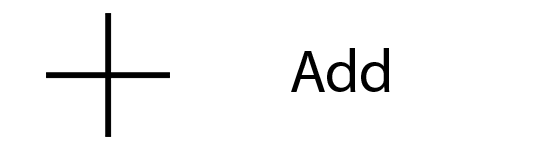
<style>
.page{position:relative;width:540px;height:150px;background:#ffffff}
.page>*{position:absolute;margin:0}
.t1{font:60.4px "MyriadPro-Regular";color:#000000}
</style>
<div class="page">
<p class="t1" style="left:291px;top:48px;width:99px;height:44px">Add</p>
</div>
